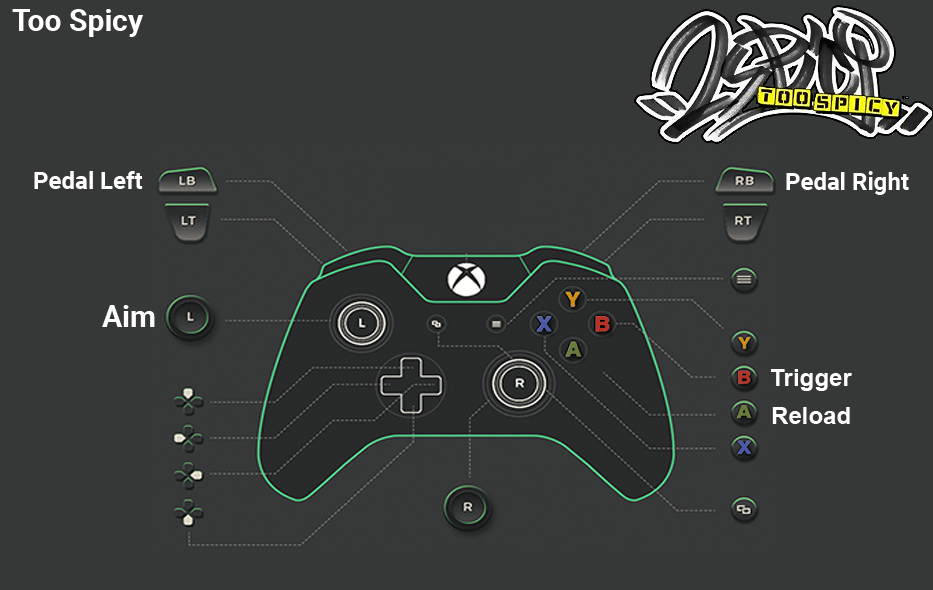
<style>
.page{position:relative;width:933px;height:590px;background:#363838}
.page>*{position:absolute;margin:0}
.t1{font:30px "Roboto-Bold";color:#ffffff}
.t2{font:24px "Roboto-Bold";color:#ffffff}
.t3{font:30px "Roboto-Bold";color:#fefefe}
.t4{font:24px "Arial-BoldMT";color:#fefefe}
</style>
<div class="page">
<p class="t1" style="left:12px;top:9px;width:131px;height:28px">Too Spicy</p>
<p class="t2" style="left:34px;top:171px;width:109px;height:18px">Pedal Left</p>
<p class="t2" style="left:786px;top:171px;width:123px;height:24px">Pedal Right</p>
<p class="t3" style="left:102px;top:305px;width:53px;height:22px">Aim</p>
<p class="t4" style="left:771px;top:369px;width:81px;height:22px">Trigger</p>
<p class="t4" style="left:772px;top:407px;width:78px;height:17px">Reload</p>
</div>
